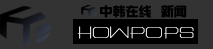
<style>
.page{position:relative;width:213px;height:49px;background:#333333}
.page>*{position:absolute;margin:0}
.t1{font:13px "DFZongYi-Bd-80-Win-GB";color:#000000}
.t2{font:18px "ArtlookinOneType"}
</style>
<div class="page">
<p class="t1" style="left:100px;top:5px;width:51px;height:13px">中韩在线</p>
<p class="t1" style="left:161px;top:5px;width:26px;height:13px">新闻</p>
<p class="t2" style="left:77px;top:26px;width:117px;height:13px">HOWPOPS</p>
</div>
